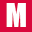
<style>
.page{position:relative;width:32px;height:32px;background:#d9083c}
.page>*{position:absolute;margin:0}
.t1{font:30px "Impact";color:#ffffff}
</style>
<div class="page">
<p class="t1" style="left:6px;top:3px;width:20px;height:24px">M</p>
</div>
